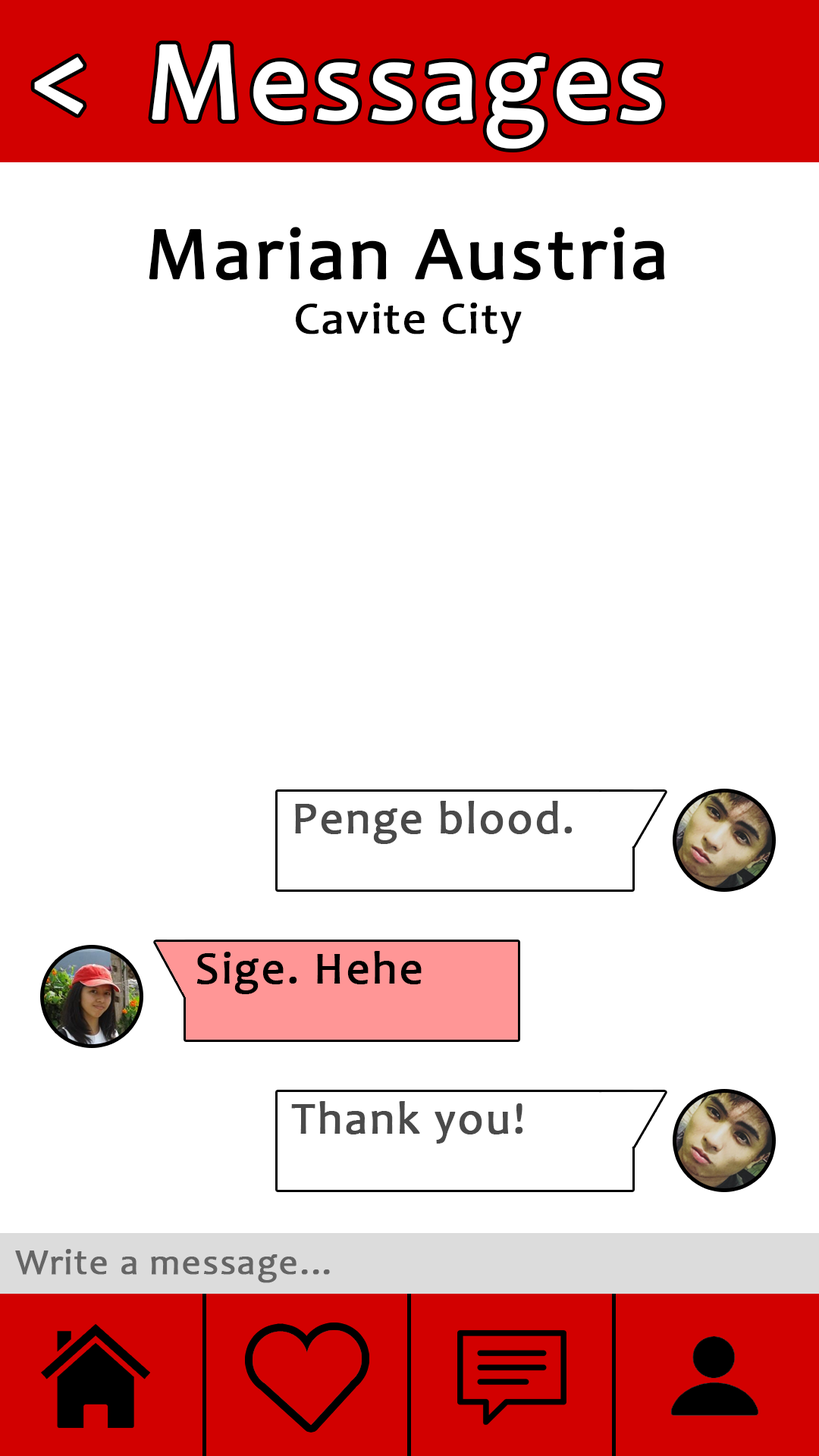
<style>
.page{position:relative;width:819px;height:1456px;background:#ffffff}
.page>*{position:absolute;margin:0}
.t1{font:113.4px "Candara";letter-spacing:0.03em;color:#ffffff;font-weight:bold}
.t2{font:113.7px "Candara";letter-spacing:0.03em;color:#ffffff;font-weight:bold}
.t3{font:75.9px "Candara";letter-spacing:0.03em;color:#000000;font-weight:bold}
.t4{font:45.5px "Candara";letter-spacing:0.03em;color:#000000;font-weight:bold}
.t5{font:45.5px "Candara";letter-spacing:0.03em;color:#4a4a4a;font-weight:bold}
.t6{font:36.4px "Candara";letter-spacing:0.03em;color:#656565;font-weight:bold}
</style>
<div class="page">
<p class="t1" style="left:152px;top:44px;width:510px;height:105px">Messages</p>
<p class="t2" style="left:34px;top:57px;width:49px;height:58px">&lt;</p>
<p class="t3" style="left:149px;top:227px;width:516px;height:117px;text-align:center">Marian Austria<br><span class="t4">Cavite City</span></p>
<p class="t5" style="left:295px;top:801px;width:278px;height:43px">Penge blood.</p>
<p class="t4" style="left:197px;top:951px;width:225px;height:43px">Sige. Hehe</p>
<p class="t5" style="left:291px;top:1101px;width:232px;height:43px">Thank you!</p>
<p class="t6" style="left:15px;top:1249px;width:315px;height:34px">Write a message...</p>
</div>
